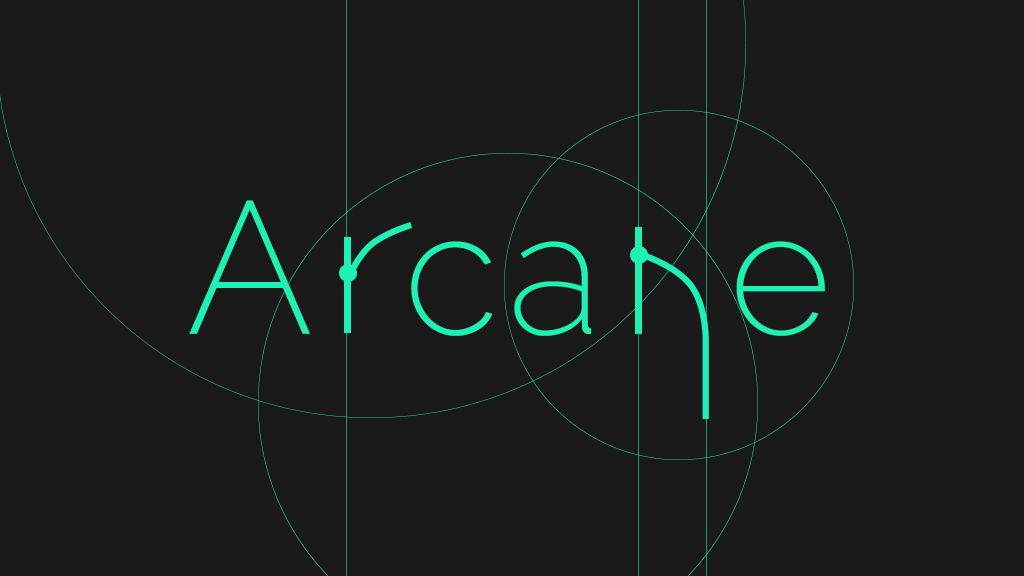
<style>
.page{position:relative;width:1024px;height:576px;background:#1a1a1a}
.page>*{position:absolute;margin:0}
.t1{font:175px "Raleway-ExtraLight";letter-spacing:0.055em;color:#1ff0b3}
.t2{font:187.5px "Raleway-ExtraLight";color:#1ff0b3}
.t3{font:175px "Raleway-ExtraLight";letter-spacing:0.025em;color:#1ff0b3}
</style>
<div class="page">
<p class="t1" style="left:189px;top:200px;width:636px;height:136px"><span class="t2">A  </span>ca  <span class="t3">e</span></p>
</div>
